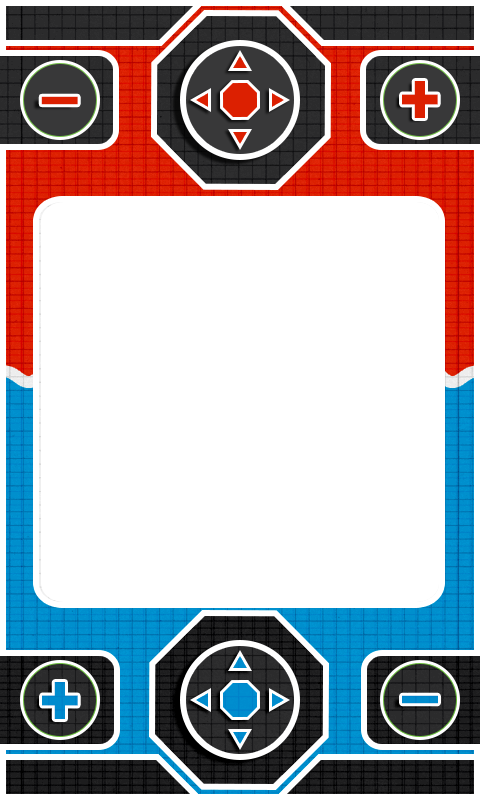
<style>
.page{position:relative;width:480px;height:800px;background:#ffffff}
.page>*{position:absolute;margin:0}
.t1{font:72px "STHupo";color:#dc2001}
.t2{font:72px "STHupo";color:#0093d1}
</style>
<div class="page">
<p class="t1" style="left:402px;top:81px;width:36px;height:37px;rotate:180deg">+</p>
<p class="t1" style="left:41px;top:96px;width:37px;height:9px;rotate:180deg">_</p>
<p class="t2" style="left:42px;top:682px;width:36px;height:37px">+</p>
<p class="t2" style="left:402px;top:695px;width:36px;height:9px">_</p>
</div>
